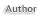
<style>
.page{position:relative;width:42px;height:18px;background:#ffffff}
.page>*{position:absolute;margin:0}
.t1{font:10px "AmiraParadiso";color:#646464}
</style>
<div class="page">
<p class="t1" style="left:5px;top:5px;width:32px;height:7px">Author</p>
</div>
